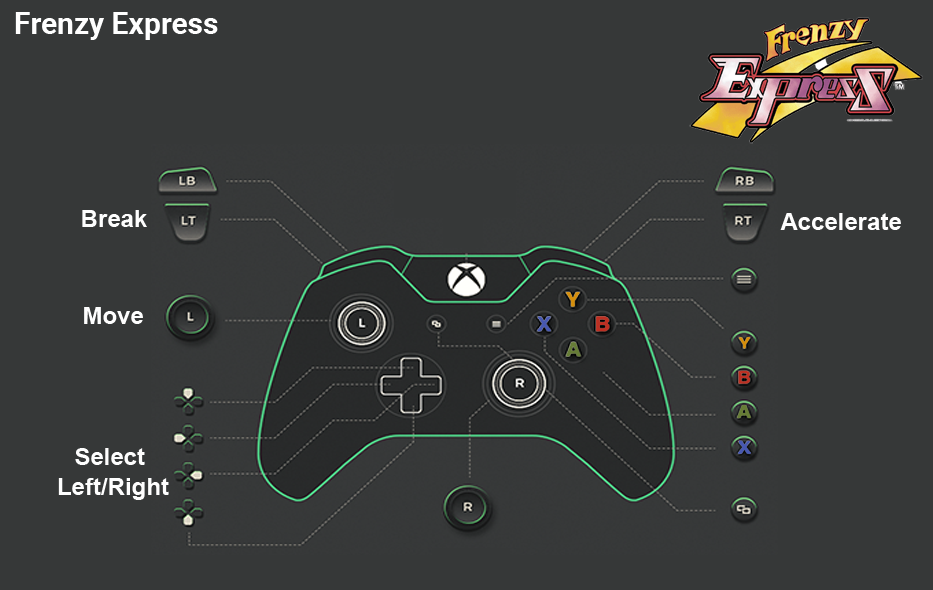
<style>
.page{position:relative;width:933px;height:590px;background:#363838}
.page>*{position:absolute;margin:0}
.t1{font:30px "Roboto-Bold";color:#ffffff}
.t2{font:24px "Arial-BoldMT";color:#fefefe}
.t3{font:24px/30px "Arial-BoldMT";color:#fefefe}
</style>
<div class="page">
<p class="t1" style="left:15px;top:12px;width:203px;height:28px">Frenzy Express</p>
<p class="t2" style="left:82px;top:210px;width:65px;height:17px">Break</p>
<p class="t2" style="left:780px;top:213px;width:121px;height:17px">Accelerate</p>
<p class="t2" style="left:84px;top:307px;width:59px;height:17px">Move</p>
<p class="t3" style="left:58px;top:448px;width:111px;height:52px;text-align:center">Select <br>Left/Right</p>
</div>
